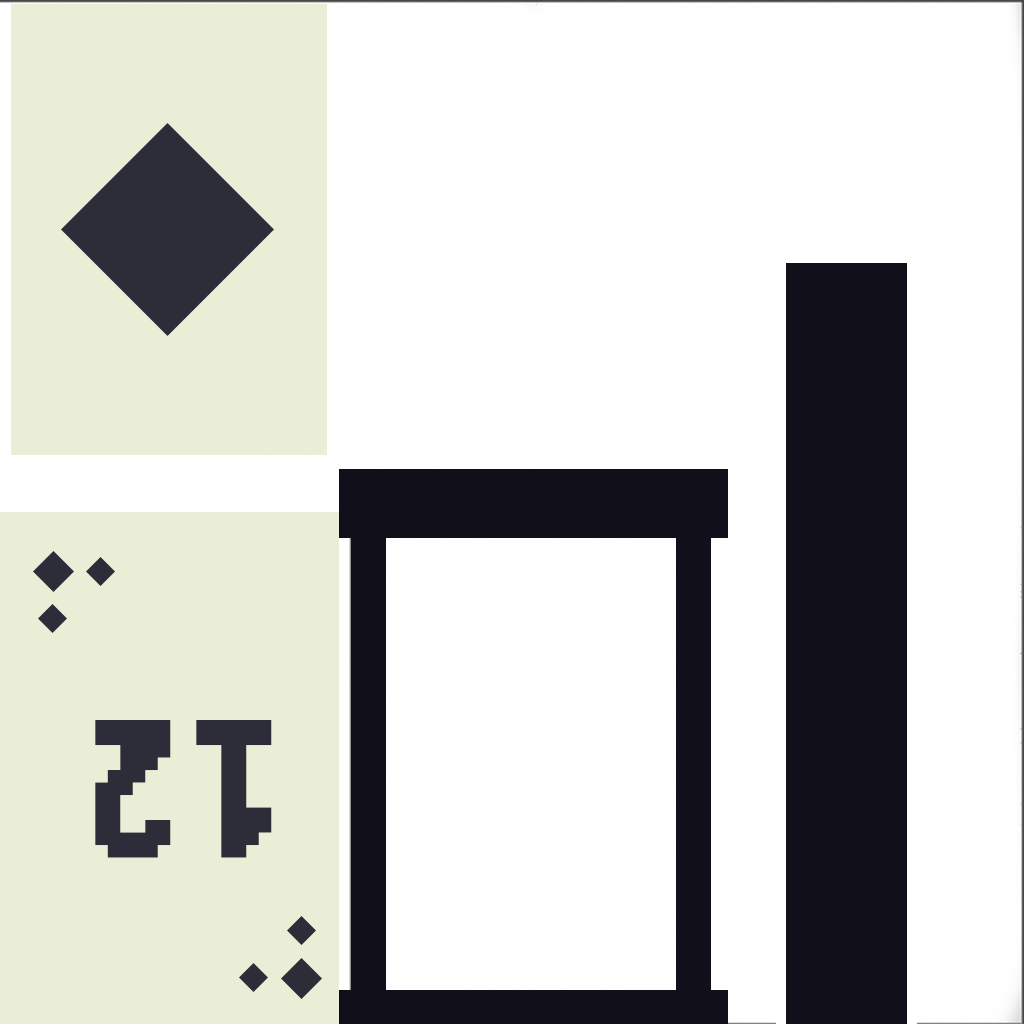
<style>
.page{position:relative;width:1024px;height:1024px;background:#fefefe}
.page>*{position:absolute;margin:0}
.t1{font:199.9px "Pixellari";letter-spacing:0.005em;color:#2d2d39}
</style>
<div class="page">
<p class="t1" style="left:95px;top:720px;width:177px;height:138px;rotate:180deg">12</p>
</div>
